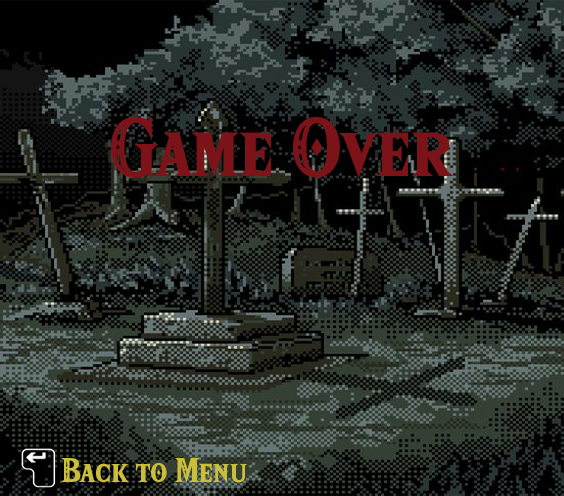
<style>
.page{position:relative;width:564px;height:496px}
.page>*{position:absolute;margin:0}
.t1{font:72px "HyliaSerifBeta-Regular";color:#7b1319}
.t2{font:30px "HyliaSerifBeta-Regular";color:#cbbf3a}
</style>
<div class="page">
<p class="t1" style="left:111px;top:117px;width:343px;height:61px">Game Over</p>
<p class="t2" style="left:61px;top:458px;width:186px;height:25px">Back to Menu</p>
</div>
